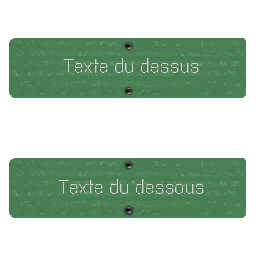
<style>
.page{position:relative;width:256px;height:256px;background:#ffffff}
.page>*{position:absolute;margin:0}
.t1{font:19.4px "Purista-Light";color:#d6d2ce;scale:0.95 1}
</style>
<div class="page">
<p class="t1" style="left:63px;top:58px;width:136px;height:15px">Texte du dessus</p>
<p class="t1" style="left:58px;top:179px;width:146px;height:15px">Texte du dessous</p>
</div>
